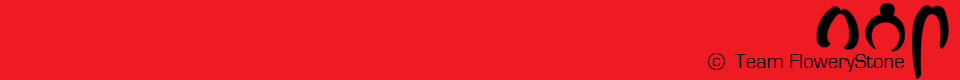
<style>
.page{position:relative;width:960px;height:80px;background:#ee1b22}
.page>*{position:absolute;margin:0}
.t1{font:20.8px "EurostileRegular";color:#000000}
.t2{font:17.7px "EurostileRegular";color:#000000}
</style>
<div class="page">
<p class="t1" style="left:735px;top:54px;width:169px;height:18px">Team FloweryStone</p>
<p class="t2" style="left:712px;top:58px;width:9px;height:8px">c</p>
</div>
